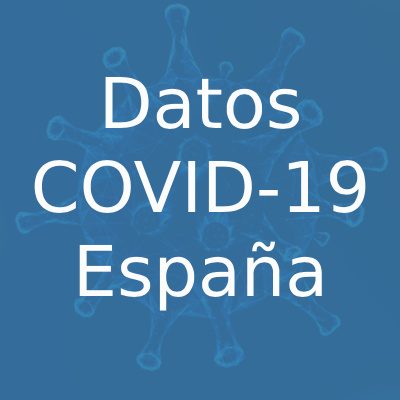
<style>
.page{position:relative;width:400px;height:400px}
.page>*{position:absolute;margin:0}
.t1{font:70px "DejaVuSans";color:#fcfcfc}
</style>
<div class="page">
<p class="t1" style="left:34px;top:76px;width:332px;height:235px;text-align:center">Datos<br>COVID-19<br>España</p>
</div>
